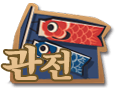
<style>
.page{position:relative;width:117px;height:93px;background:#ffffff}
.page>*{position:absolute;margin:0}
.t1{font:39px "MJemokBatang";letter-spacing:-0.14em;color:#e7c18f;font-weight:bold;scale:1.12 1}
.t2{font:32.9px "MJemokBatang";letter-spacing:-0.14em;color:#e7c18f;font-weight:bold;scale:1.12 1}
</style>
<div class="page">
<p class="t1" style="left:2px;top:45px;width:69px;height:35px">관<span class="t2">전</span></p>
</div>
